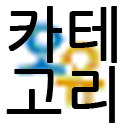
<style>
.page{position:relative;width:128px;height:128px;background:#ffffff}
.page>*{position:absolute;margin:0}
.t1{font:60px/60px "NanumGothic";letter-spacing:0.04em;color:#000000;font-weight:bold}
</style>
<div class="page">
<p class="t1" style="left:6px;top:6px;width:111px;height:117px;text-align:center">카테<br>고리</p>
</div>
